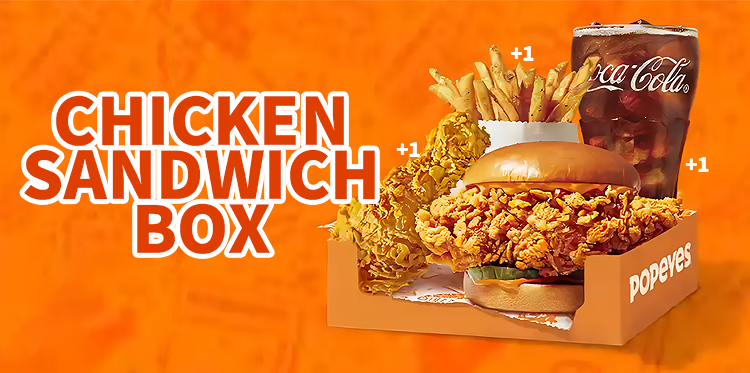
<style>
.page{position:relative;width:750px;height:373px}
.page>*{position:absolute;margin:0}
.t1{font:20px "NotoSansKR-Black";color:#ffffff}
.t2{font:65px/54px "NotoSansKR-Black";color:#de3f00}
</style>
<div class="page">
<p class="t1" style="left:510px;top:46px;width:24px;height:15px">+1</p>
<p class="t2" style="left:24px;top:95px;width:351px;height:159px;text-align:center">CHICKEN<br>SANDWICH<br>BOX</p>
<p class="t1" style="left:396px;top:142px;width:24px;height:15px">+1</p>
<p class="t1" style="left:685px;top:157px;width:24px;height:15px">+1</p>
</div>
